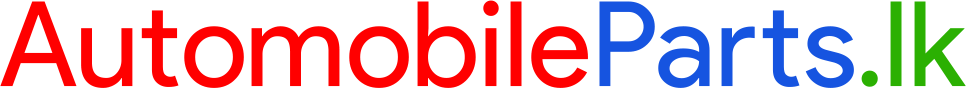
<style>
.page{position:relative;width:966px;height:88px;background:#ffffff}
.page>*{position:absolute;margin:0}
.t1{font:117.8px "ProductSans-Regular";color:#ff0000}
.t2{font:117.8px "ProductSans-Regular";color:#1654e0}
.t3{font:117.8px "ProductSans-Regular";color:#2bb002}
</style>
<div class="page">
<p class="t1" style="left:0px;top:0px;width:966px;height:88px">Automobile<span class="t2">Parts</span><span class="t3">.lk</span></p>
</div>
